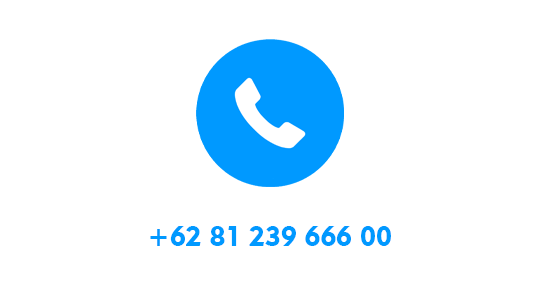
<style>
.page{position:relative;width:540px;height:300px;background:#ffffff}
.page>*{position:absolute;margin:0}
.t1{font:27.6px "Geometric415BT-BlackA";letter-spacing:-0.005em;color:#0099ff;font-variant:small-caps}
</style>
<div class="page">
<p class="t1" style="left:150px;top:226px;width:241px;height:20px">+62 81 239 666 00</p>
</div>
